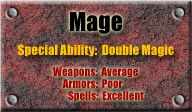
<style>
.page{position:relative;width:192px;height:112px}
.page>*{position:absolute;margin:0}
.t1{font:24px "Impact";color:#000000}
.t2{font:13px "Impact";color:#ffc600}
.t3{font:11px "Impact";color:#9c0000}
</style>
<div class="page">
<p class="t1" style="left:70px;top:12px;width:52px;height:22px">Mage</p>
<p class="t2" style="left:18px;top:44px;width:156px;height:13px">Special Ability:  Double Magic</p>
<p class="t3" style="left:53px;top:67px;width:85px;height:11px">Weapons:  Average</p>
<p class="t3" style="left:62px;top:79px;width:61px;height:9px">Armors:  Poor</p>
<p class="t3" style="left:68px;top:91px;width:76px;height:10px">Spells:  Excellent</p>
</div>
